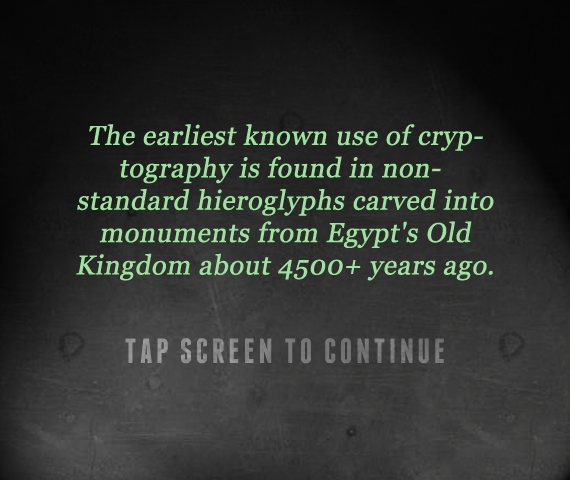
<style>
.page{position:relative;width:570px;height:480px}
.page>*{position:absolute;margin:0}
.t1{font:27px "Georgia";color:#9fe29f;font-weight:bold;font-style:italic}
.t2{font:35px "Franchise-Bold";letter-spacing:0.1em;color:#7e7c7c;text-transform:uppercase}
</style>
<div class="page">
<p class="t1" style="left:76px;top:124px;width:418px;height:157px;text-align:center">The earliest known use of cryptography is found in non-standard hieroglyphs carved into monuments from Egypt's Old Kingdom about 4500+ years ago.</p>
<p class="t2" style="left:125px;top:338px;width:319px;height:26px">Tap Screen to Continue</p>
</div>
